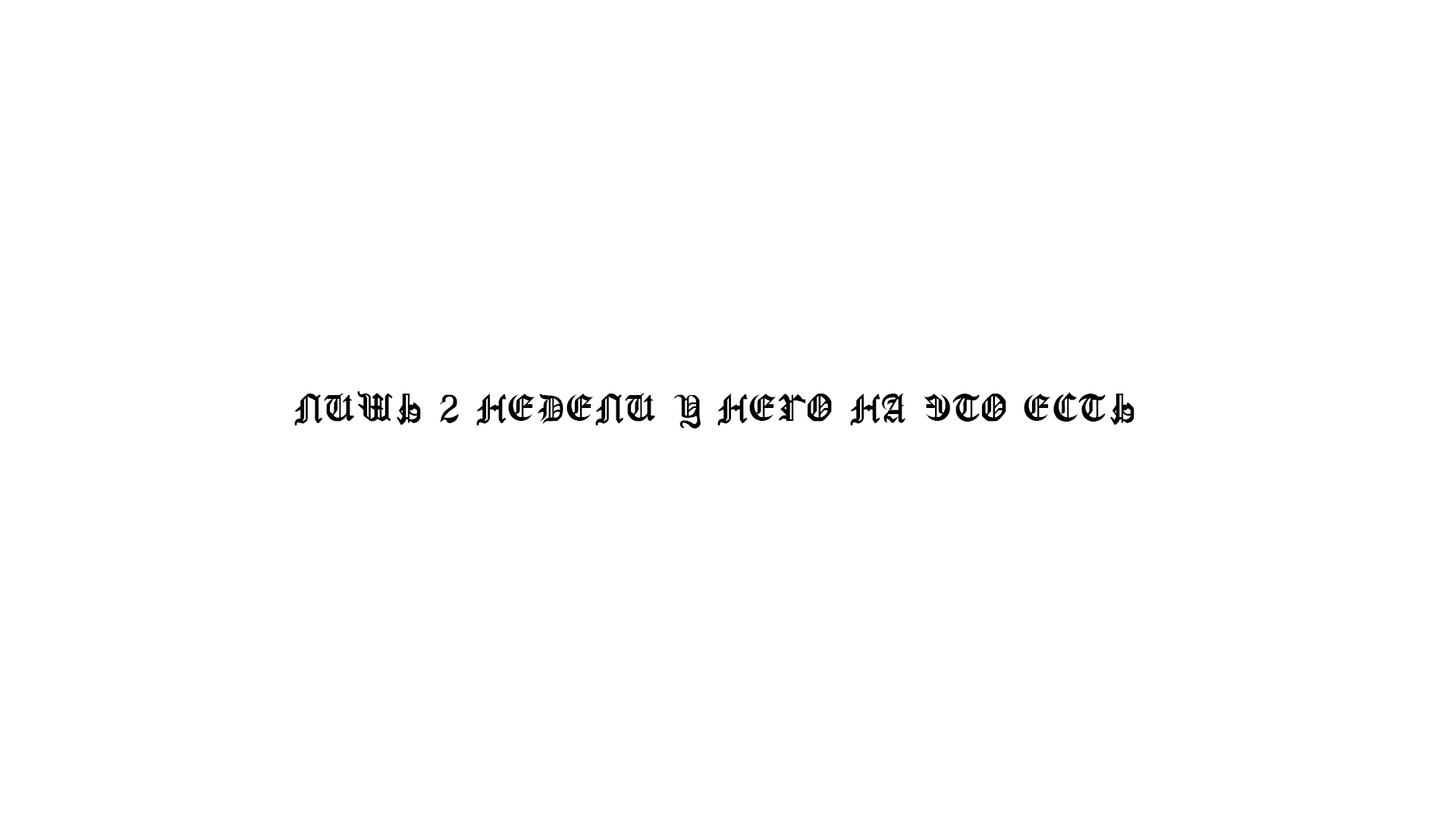
<style>
.page{position:relative;width:1456px;height:819px;background:#ffffff}
.page>*{position:absolute;margin:0}
.t1{font:9.1px "GothicRusMedium";color:#000000}
</style>
<div class="page">
<p class="t1" style="left:294px;top:391px;width:840px;height:37px;text-align:center">ЛИШЬ 2 НЕДЕЛИ У НЕГО НА ЭТО ЕСТЬ</p>
</div>
